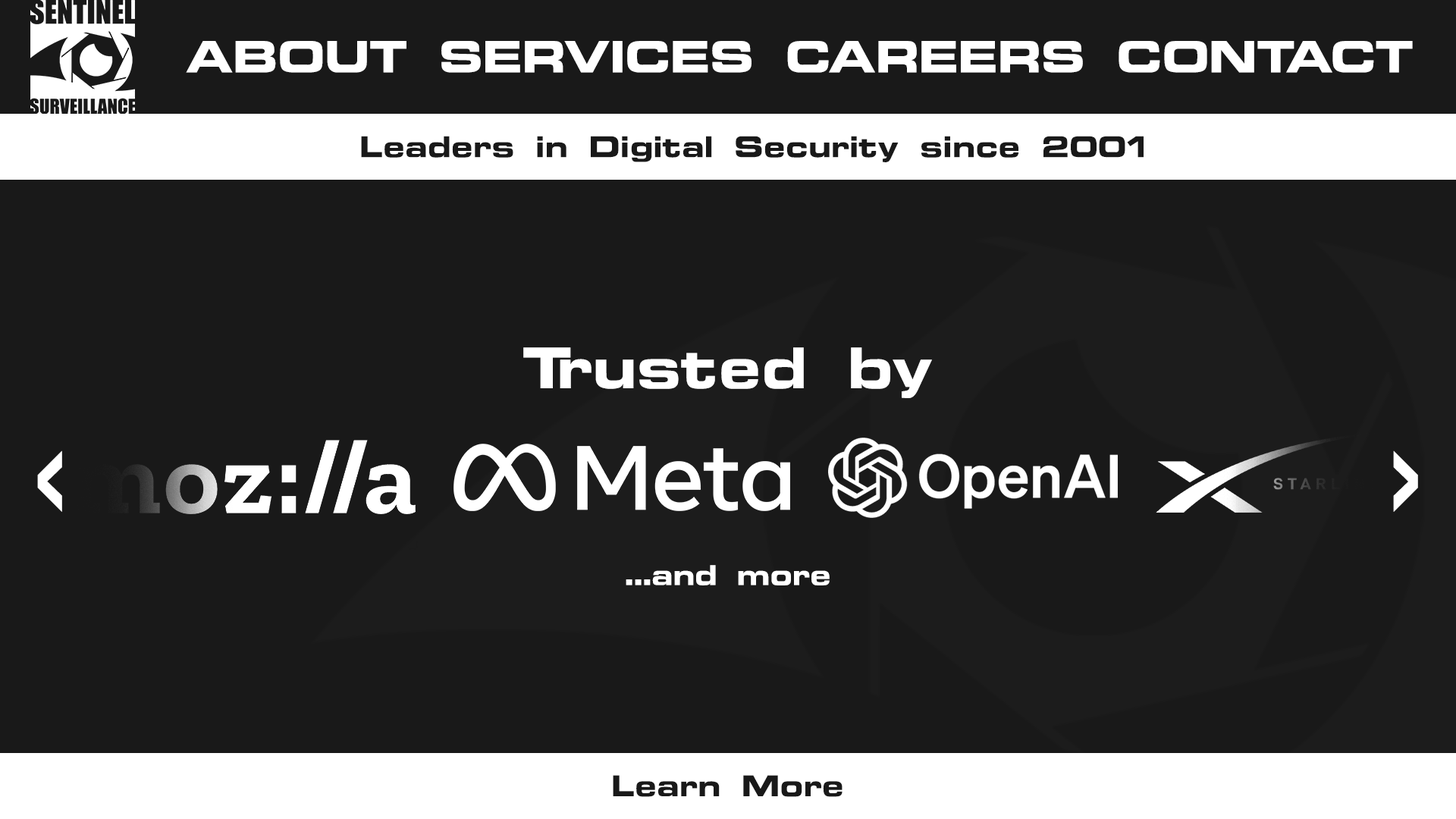
<style>
.page{position:relative;width:1456px;height:819px;background:#191919}
.page>*{position:absolute;margin:0}
.t1{font:39px "OPTIEdgarBold-Extended";color:#ffffff}
.t2{font:26px "OPTIEdgarBold-Extended";color:#191919}
.t3{font:50.7px "OPTIEdgarBold-Extended";color:#ffffff}
.t4{font:124px "Impact";color:#ffffff;scale:0.42 1}
.t5{font:24.8px "OPTIEdgarBold-Extended";color:#ffffff}
</style>
<div class="page">
<p class="t1" style="left:186px;top:41px;width:1227px;height:32px">ABOUT SERVICES CAREERS CONTACT</p>
<p class="t2" style="left:361px;top:136px;width:783px;height:26px">Leaders in Digital Security since 2001</p>
<p class="t3" style="left:523px;top:347px;width:409px;height:51px">Trusted by</p>
<p class="t4" style="left:37px;top:450px;width:25px;height:62px">&lt;</p>
<p class="t4" style="left:1393px;top:450px;width:25px;height:62px">&gt;</p>
<p class="t5" style="left:626px;top:565px;width:204px;height:20px">...and more</p>
<p class="t2" style="left:613px;top:775px;width:229px;height:22px">Learn More</p>
</div>
